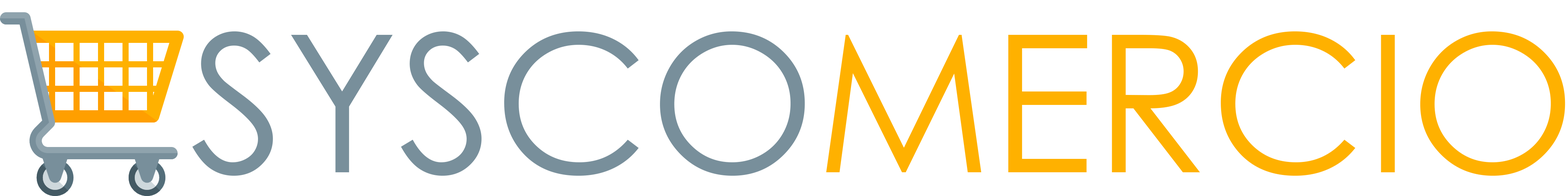
<style>
.page{position:relative;width:1568px;height:196px;background:#ffffff}
.page>*{position:absolute;margin:0}
.t1{font:191.4px "CenturyGothic";color:#ffb100}
.t2{font:191.4px "CenturyGothic";color:#788f9b}
</style>
<div class="page">
<p class="t1" style="left:192px;top:31px;width:1373px;height:145px"><span class="t2">SYSCO</span>MERCIO</p>
</div>
